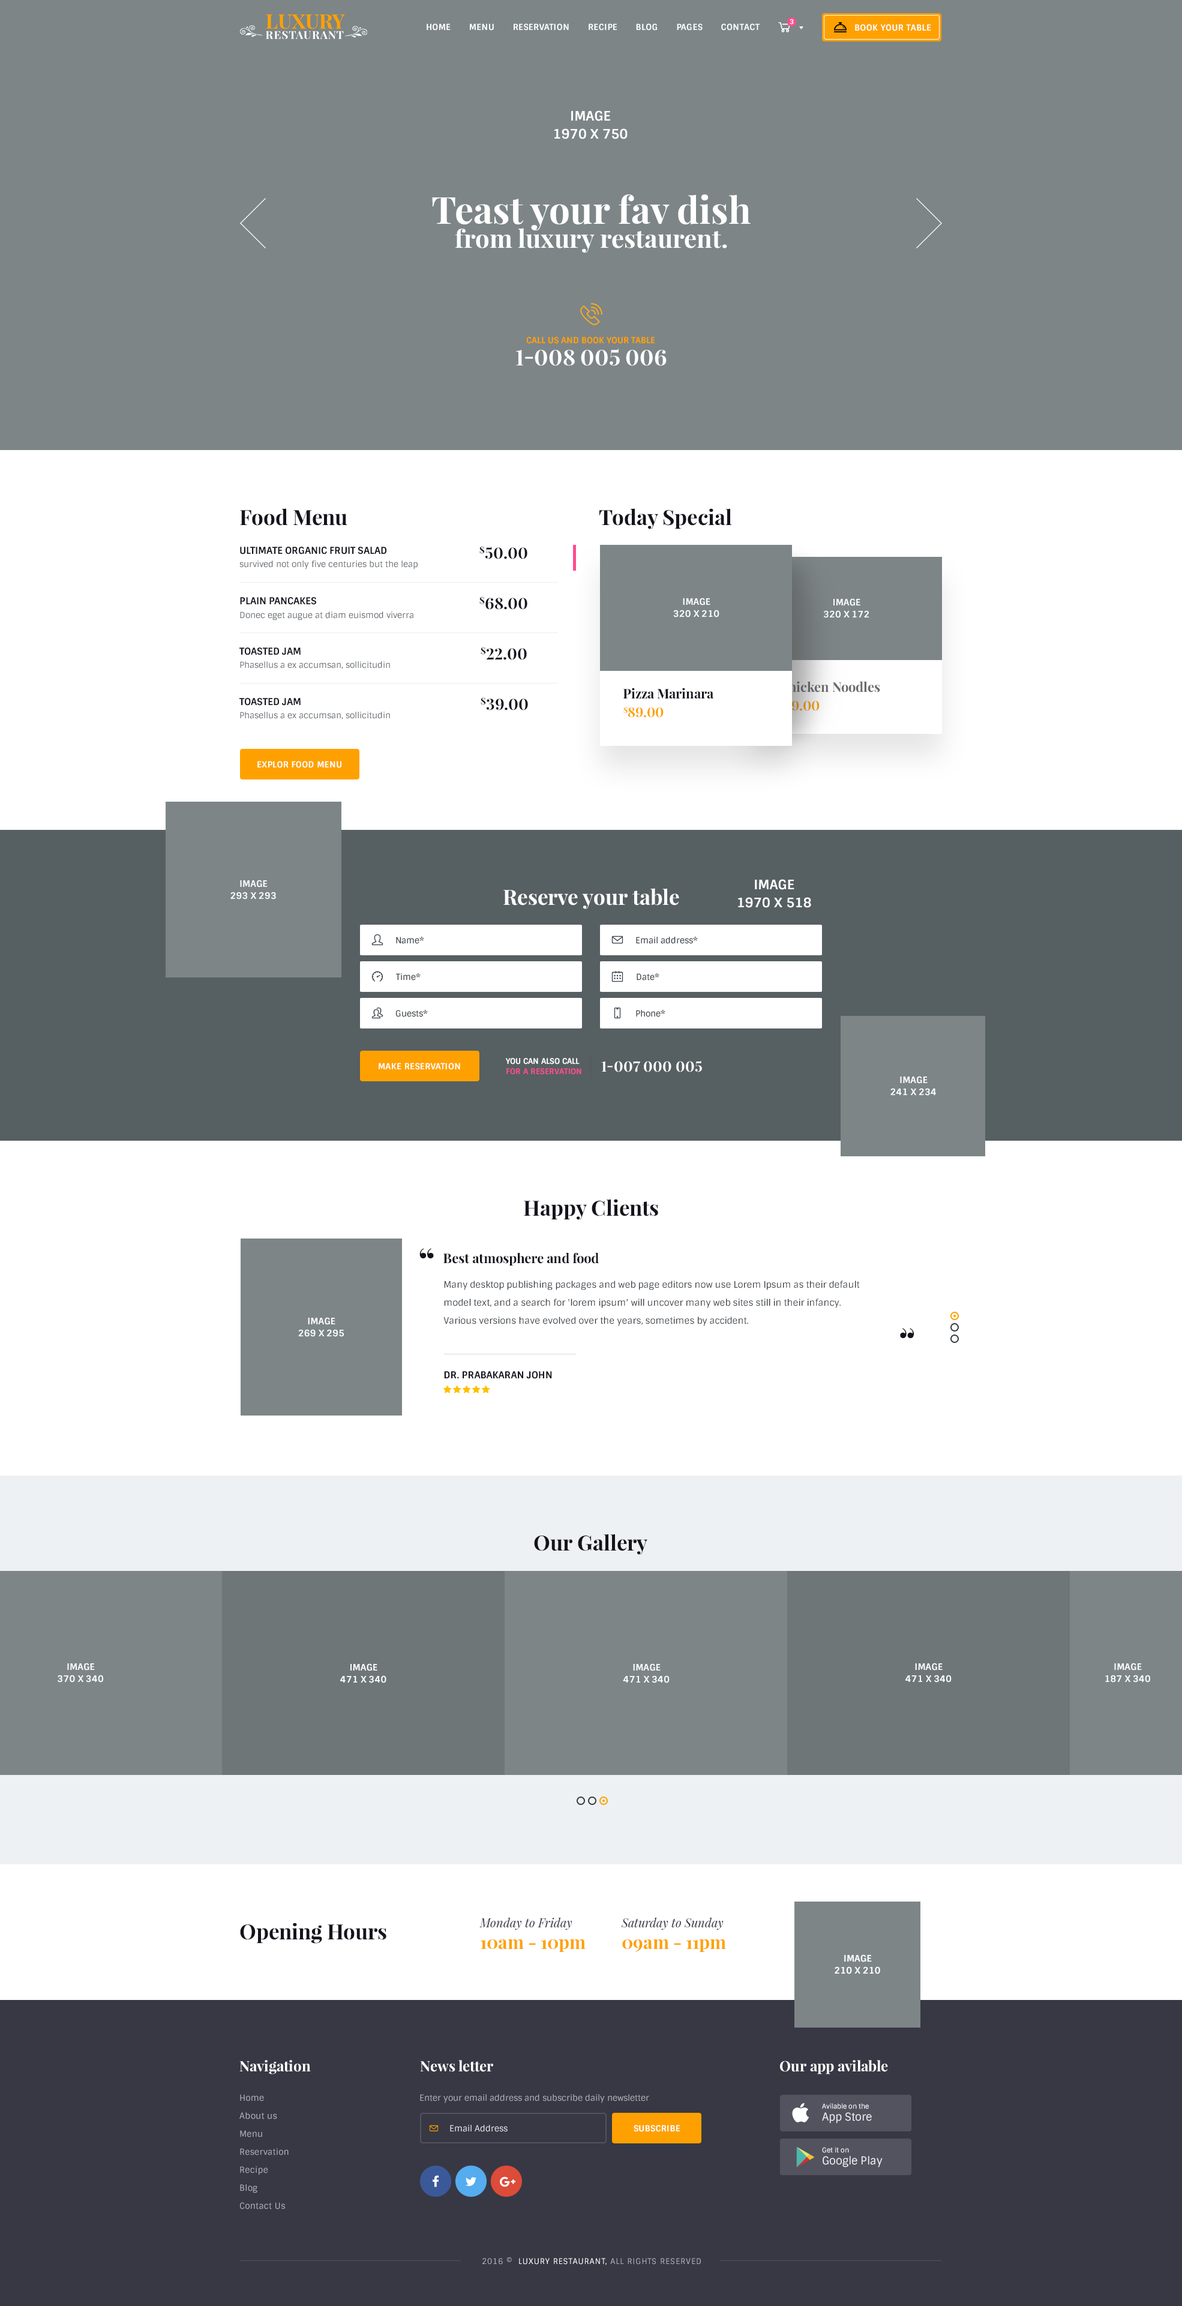
<style>
.page{position:relative;width:1182px;height:2306px;background:#ffffff}
.page>*{position:absolute;margin:0}
.t1{font:8.4px "Sintony-Bold";letter-spacing:0.025em;color:#ffffff;text-transform:uppercase}
.t2{font:6.6px "Sintony-Bold";letter-spacing:0.025em;color:#ffffff;text-transform:uppercase}
.t3{font:13.2px/18px "Sintony-Bold";letter-spacing:0.005em;color:#ffffff;text-transform:uppercase}
.t4{font:25.2px/24px "PlayfairDisplay-Bold";color:#ffffff}
.t5{font:37.2px/24px "PlayfairDisplay-Bold";color:#ffffff}
.t6{font:8.4px "Sintony-Bold";color:#fea100;text-transform:uppercase}
.t7{font:21.6px "PlayfairDisplay-Bold";color:#ffffff;text-transform:uppercase}
.t8{font:21px "PlayfairDisplay-Bold";color:#14141d}
.t9{font:15.6px "PlayfairDisplay-Bold";color:#14141d;text-transform:uppercase}
.t10{font:9.6px "Sintony-Bold";color:#14141d;text-transform:uppercase}
.t11{font:8.4px "Sintony";color:#5c6369}
.t12{font:9px/12px "Sintony-Bold";letter-spacing:0.005em;color:#ffffff;text-transform:uppercase}
.t13{font:13.2px "PlayfairDisplay-Bold";color:#14141d}
.t14{font:13.2px "PlayfairDisplay-Bold";color:#69696f}
.t15{font:13.2px "PlayfairDisplay-Bold";text-transform:uppercase}
.t16{font:13.2px "PlayfairDisplay-Bold";color:#fea100;text-transform:uppercase}
.t17{font:21px "PlayfairDisplay-Bold";color:#ffffff}
.t18{font:8.4px "Sintony";color:#363d43}
.t19{font:7.8px/10.2px "Sintony-Bold";color:#ffffff;text-transform:uppercase}
.t20{font:7.8px/10.2px "Sintony-Bold";color:#fe4c8d;text-transform:uppercase}
.t21{font:14.4px "PlayfairDisplay-Bold";color:#ffffff;text-transform:uppercase}
.t22{font:35.9px "PlayfairDisplay-Bold";color:#14141d}
.t23{font:9px/18px "Sintony";color:#363d43}
.t24{font:36px "PlayfairDisplay-Bold";color:#14141d}
.t25{font:12px "PlayfairDisplay-Italic";color:#373844}
.t26{font:18px "PlayfairDisplay-Bold";color:#fea100}
.t27{font:14.4px "PlayfairDisplay-Bold";color:#ffffff}
.t28{font:8.4px/18px "Sintony";letter-spacing:0.025em;color:#adb2b7}
.t29{font:8.4px "Sintony";color:#adb2b7}
.t30{font:6.6px/12px "Sintony";color:#edf1f3}
.t31{font:10.8px/12px "Sintony";color:#edf1f3}
.t32{font:8.4px "Sintony";color:#e6e9eb}
.t33{font:7.8px "Sintony";letter-spacing:0.075em;color:#adb2b7;text-transform:uppercase}
.t34{font:7.8px "Sintony";letter-spacing:0.075em;color:#ffffff;text-transform:uppercase}
</style>
<div class="page">
<p class="t1" style="left:427px;top:23px;width:333px;height:8px">Home       menu       reservation       recipe       blog       Pages       contact</p>
<p class="t2" style="left:790px;top:19px;width:4px;height:6px">3</p>
<p class="t1" style="left:855px;top:24px;width:76px;height:7px">Book your table</p>
<p class="t3" style="left:554px;top:110px;width:74px;height:29px;text-align:center">Image<br>1970 x 750</p>
<p class="t4" style="left:432px;top:194px;width:319px;height:59px;text-align:center"><span class="t5">Teast your fav dish<br></span>from luxury restaurent.</p>
<p class="t6" style="left:526px;top:337px;width:129px;height:7px">Call us and book your table</p>
<p class="t7" style="left:516px;top:349px;width:151px;height:17px">1-008 005 006</p>
<p class="t8" style="left:240px;top:508px;width:107px;height:18px">Food Menu</p>
<p class="t8" style="left:599px;top:508px;width:133px;height:21px">Today Special</p>
<p class="t9" style="left:479px;top:545px;width:48px;height:14px">$50.00</p>
<p class="t10" style="left:240px;top:547px;width:146px;height:7px">Ultimate organic fruit salad</p>
<p class="t11" style="left:239px;top:560px;width:179px;height:9px">survived not only five centuries but the leap</p>
<p class="t10" style="left:240px;top:597px;width:76px;height:8px">Plain pancakes</p>
<p class="t9" style="left:479px;top:596px;width:48px;height:14px">$68.00</p>
<p class="t12" style="left:673px;top:598px;width:46px;height:19px;text-align:center">Image<br>320 x 210</p>
<p class="t12" style="left:824px;top:598px;width:45px;height:20px;text-align:center">Image<br>320 x 172</p>
<p class="t11" style="left:240px;top:611px;width:173px;height:9px">Donec eget augue at diam euismod viverra</p>
<p class="t10" style="left:239px;top:647px;width:62px;height:8px">Toasted jam</p>
<p class="t9" style="left:481px;top:646px;width:46px;height:14px">$22.00</p>
<p class="t11" style="left:240px;top:661px;width:150px;height:8px">Phasellus a ex accumsan, sollicitudin</p>
<p class="t13" style="left:623px;top:688px;width:91px;height:10px">Pizza Marinara</p>
<p class="t14" style="left:779px;top:681px;width:101px;height:11px">Chicken Noodles</p>
<p class="t10" style="left:239px;top:698px;width:62px;height:8px">Toasted jam</p>
<p class="t9" style="left:481px;top:697px;width:47px;height:13px">$39.00</p>
<p class="t15" style="left:779px;top:700px;width:41px;height:11px">$89.00</p>
<p class="t11" style="left:240px;top:712px;width:150px;height:7px">Phasellus a ex accumsan, sollicitudin</p>
<p class="t16" style="left:623px;top:706px;width:41px;height:12px">$89.00</p>
<p class="t1" style="left:257px;top:761px;width:84px;height:7px">Explor food menu</p>
<p class="t12" style="left:230px;top:880px;width:46px;height:19px;text-align:center">Image<br>293 x 293</p>
<p class="t3" style="left:738px;top:879px;width:73px;height:29px;text-align:center">Image<br>1970 x 518</p>
<p class="t17" style="left:503px;top:888px;width:176px;height:21px">Reserve your table</p>
<p class="t18" style="left:396px;top:936px;width:28px;height:8px">Name*</p>
<p class="t18" style="left:636px;top:936px;width:62px;height:8px">Email address*</p>
<p class="t18" style="left:395px;top:973px;width:26px;height:7px">Time*</p>
<p class="t18" style="left:637px;top:973px;width:22px;height:7px">Date*</p>
<p class="t18" style="left:395px;top:1009px;width:33px;height:8px">Guests*</p>
<p class="t18" style="left:636px;top:1009px;width:29px;height:8px">Phone*</p>
<p class="t19" style="left:506px;top:1058px;width:75px;height:17px">You can also call<br><span class="t20">for a reservation</span></p>
<p class="t21" style="left:601px;top:1060px;width:101px;height:12px">1-007 000 005</p>
<p class="t1" style="left:379px;top:1063px;width:81px;height:7px">Make reservation</p>
<p class="t12" style="left:890px;top:1076px;width:46px;height:20px;text-align:center">Image<br>241 x 234</p>
<p class="t8" style="left:524px;top:1199px;width:134px;height:21px">Happy Clients</p>
<p class="t22" style="left:419px;top:1248px;width:15px;height:11px">“</p>
<p class="t13" style="left:443px;top:1252px;width:156px;height:13px">Best atmosphere and food</p>
<p class="t23" style="left:443px;top:1280px;width:417px;height:46px">Many desktop publishing packages and web page editors now use Lorem Ipsum as their default <br>model text, and a search for 'lorem ipsum' will uncover many web sites still in their infancy. <br>Various versions have evolved over the years, sometimes by accident.</p>
<p class="t12" style="left:298px;top:1317px;width:46px;height:20px;text-align:center">Image<br>269 x 295</p>
<p class="t24" style="left:900px;top:1328px;width:14px;height:10px;rotate:180deg">“</p>
<p class="t10" style="left:444px;top:1371px;width:108px;height:8px">Dr. Prabakaran John</p>
<p class="t8" style="left:534px;top:1534px;width:113px;height:21px">Our Gallery</p>
<p class="t12" style="left:58px;top:1663px;width:45px;height:19px;text-align:center">Image<br>370 x 340</p>
<p class="t12" style="left:340px;top:1663px;width:46px;height:20px;text-align:center">Image<br>471 x 340</p>
<p class="t12" style="left:623px;top:1663px;width:47px;height:20px;text-align:center">Image<br>471 x 340</p>
<p class="t12" style="left:905px;top:1663px;width:47px;height:19px;text-align:center">Image<br>471 x 340</p>
<p class="t12" style="left:1105px;top:1663px;width:45px;height:19px;text-align:center">Image<br>187 x 340</p>
<p class="t8" style="left:240px;top:1922px;width:146px;height:21px">Opening Hours</p>
<p class="t25" style="left:479px;top:1917px;width:107px;height:35px">Monday to Friday<br><span class="t26">10am - 10pm</span></p>
<p class="t25" style="left:621px;top:1917px;width:105px;height:35px">Saturday to Sunday<br><span class="t26">09am - 11pm</span></p>
<p class="t12" style="left:835px;top:1954px;width:45px;height:20px;text-align:center">Image<br>210 x 210</p>
<p class="t27" style="left:239px;top:2060px;width:72px;height:14px">Navigation</p>
<p class="t27" style="left:420px;top:2060px;width:73px;height:12px">News letter</p>
<p class="t27" style="left:780px;top:2060px;width:108px;height:14px">Our app avilable</p>
<p class="t28" style="left:239px;top:2094px;width:50px;height:115px">Home<br>About us<br>Menu<br>Reservation<br>Recipe<br>Blog<br>Contact Us</p>
<p class="t29" style="left:420px;top:2094px;width:229px;height:9px">Enter your email address and subscribe daily newsletter</p>
<p class="t30" style="left:822px;top:2103px;width:50px;height:20px">Avilable on the<br><span class="t31">App Store</span></p>
<p class="t32" style="left:450px;top:2125px;width:58px;height:7px">Email Address</p>
<p class="t1" style="left:634px;top:2125px;width:46px;height:7px">Subscribe</p>
<p class="t31" style="left:822px;top:2147px;width:61px;height:20px"><span class="t30">Get it on<br></span>Google Play</p>
<p class="t33" style="left:482px;top:2257px;width:219px;height:8px">2016 ©  <span class="t34">Luxury Restaurant,</span> All rights reserved</p>
</div>
